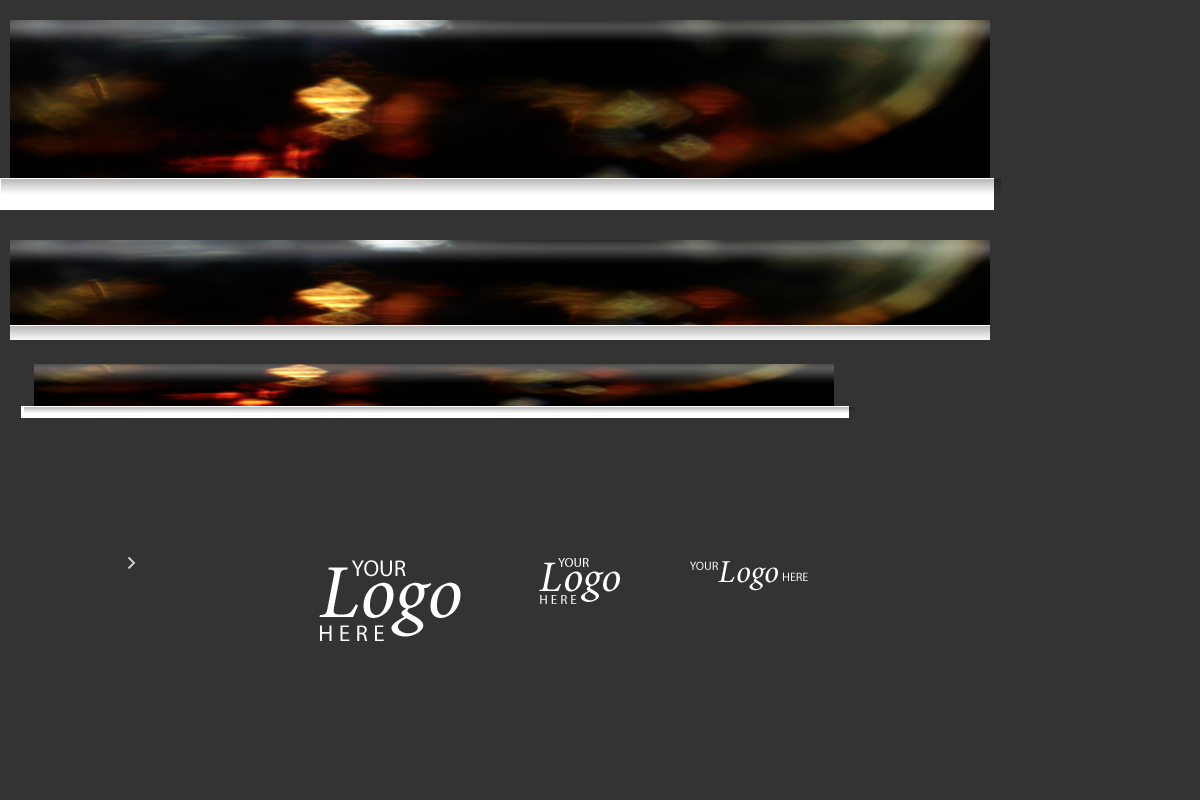
<style>
.page{position:relative;width:1200px;height:800px;background:#333333}
.page>*{position:absolute;margin:0}
.t1{font:13px "MyriadPro-Regular";color:#ffffff;text-transform:uppercase}
.t2{font:76.3px "MinionPro-It";color:#ffffff}
.t3{font:76.3px "MinionPro-It";color:#ffffff;text-transform:uppercase}
.t4{font:22.9px "MyriadPro-Regular";color:#ffffff;text-transform:uppercase}
.t5{font:43.3px "MinionPro-It";color:#ffffff}
.t6{font:43.3px "MinionPro-It";color:#ffffff;text-transform:uppercase}
.t7{font:12px "MyriadPro-Regular";color:#ffffff;text-transform:uppercase}
.t8{font:32px "MinionPro-It";color:#ffffff}
.t9{font:32px "MinionPro-It";color:#ffffff;text-transform:uppercase}
.t10{font:13px "MyriadPro-Regular";letter-spacing:0.24em;color:#ffffff;text-transform:uppercase}
.t11{font:22.9px "MyriadPro-Regular";letter-spacing:0.24em;color:#ffffff;text-transform:uppercase}
</style>
<div class="page">
<p class="t1" style="left:558px;top:558px;width:31px;height:9px">YOUR</p>
<p class="t2" style="left:319px;top:567px;width:142px;height:70px"><span class="t3">L</span>ogo</p>
<p class="t4" style="left:351px;top:560px;width:55px;height:17px">YOUR</p>
<p class="t5" style="left:539px;top:562px;width:81px;height:40px"><span class="t6">L</span>ogo</p>
<p class="t7" style="left:690px;top:561px;width:28px;height:9px">YOUR</p>
<p class="t8" style="left:718px;top:561px;width:60px;height:30px"><span class="t9">L</span>ogo</p>
<p class="t7" style="left:783px;top:572px;width:25px;height:9px">HERE</p>
<p class="t10" style="left:540px;top:595px;width:37px;height:9px">HERE</p>
<p class="t11" style="left:320px;top:625px;width:64px;height:16px">HERE</p>
</div>
